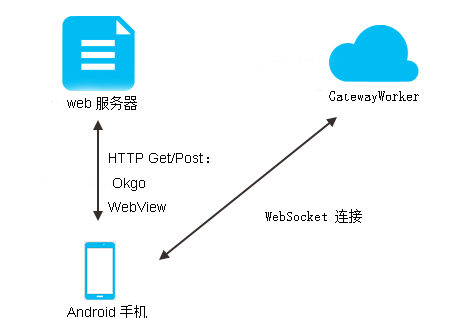
<style>
.page{position:relative;width:471px;height:318px;background:#ffffff}
.page>*{position:absolute;margin:0}
.t1{font:14.4px "ArialMT";color:#020202}
.t2{font:14.4px "SimSun";color:#020202}
.t3{font:14px "ArialMT";color:#020202}
.t4{font:14px "SimSun";color:#020202}
</style>
<div class="page">
<p class="t1" style="left:67px;top:96px;width:70px;height:14px">web <span class="t2">服务器</span></p>
<p class="t2" style="left:329px;top:91px;width:90px;height:12px">GatewayWorker</p>
<p class="t3" style="left:108px;top:153px;width:101px;height:59px">HTTP Get/Post <span class="t4">：<br></span> Okgo<br>WebView</p>
<p class="t4" style="left:265px;top:209px;width:97px;height:14px">WebSocket 连接</p>
<p class="t1" style="left:67px;top:305px;width:80px;height:14px">Android<span class="t2">手机</span></p>
</div>
